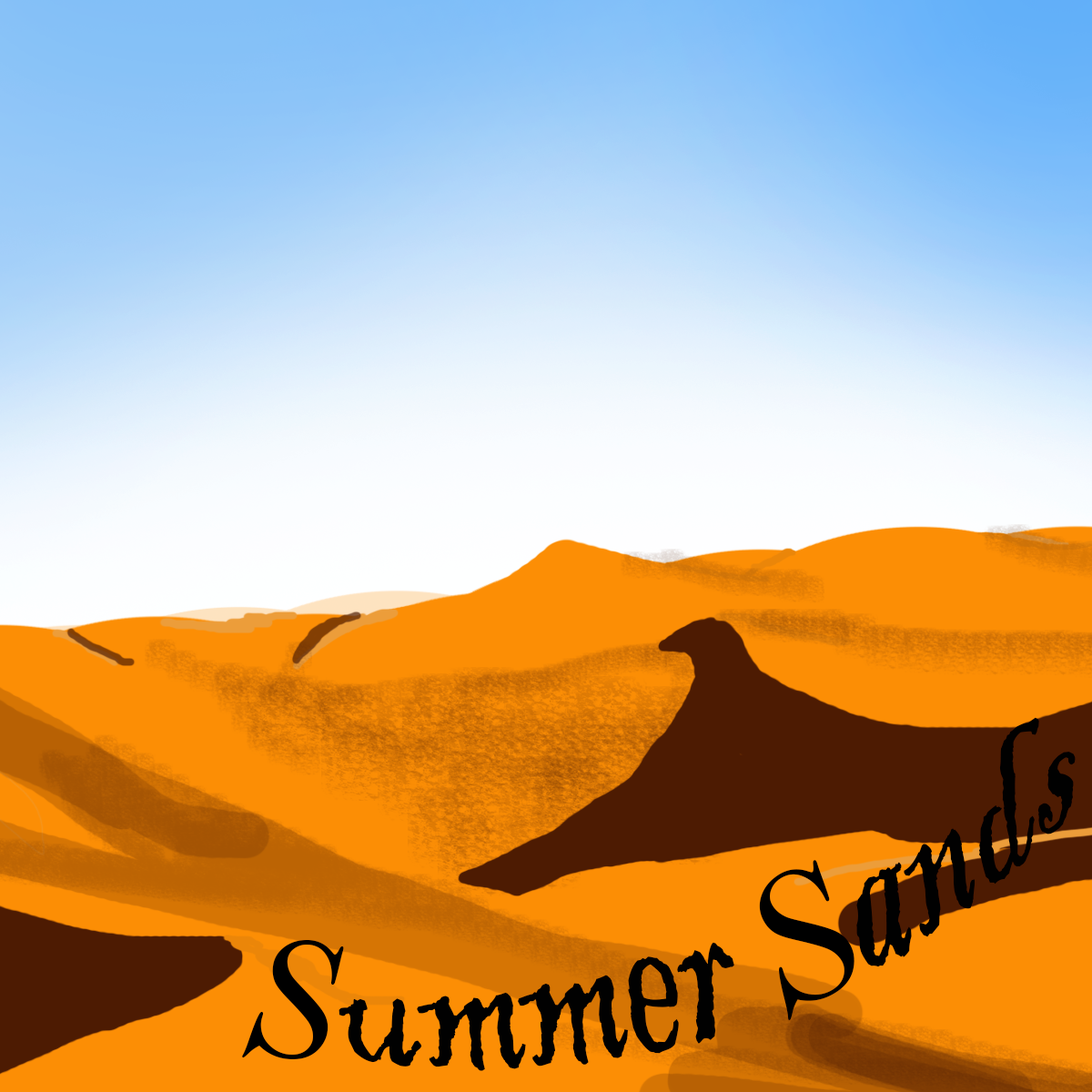
<style>
.page{position:relative;width:1092px;height:1092px}
.page>*{position:absolute;margin:0}
.t1{font:182px "BlackadderITC-Regular";color:#010101}
.t2{font:197.2px "BellMTItalic";color:#000000}
.t3{font:182px "BellMTItalic";color:#000000}
</style>
<div class="page">
<p class="t1" style="left:339px;top:717px;width:737px;height:354px;rotate:-17deg">ummer    ands</p>
<p class="t2" style="left:759px;top:860px;width:95px;height:160px;rotate:-33deg">S</p>
<p class="t3" style="left:242px;top:940px;width:102px;height:119px">S</p>
</div>
